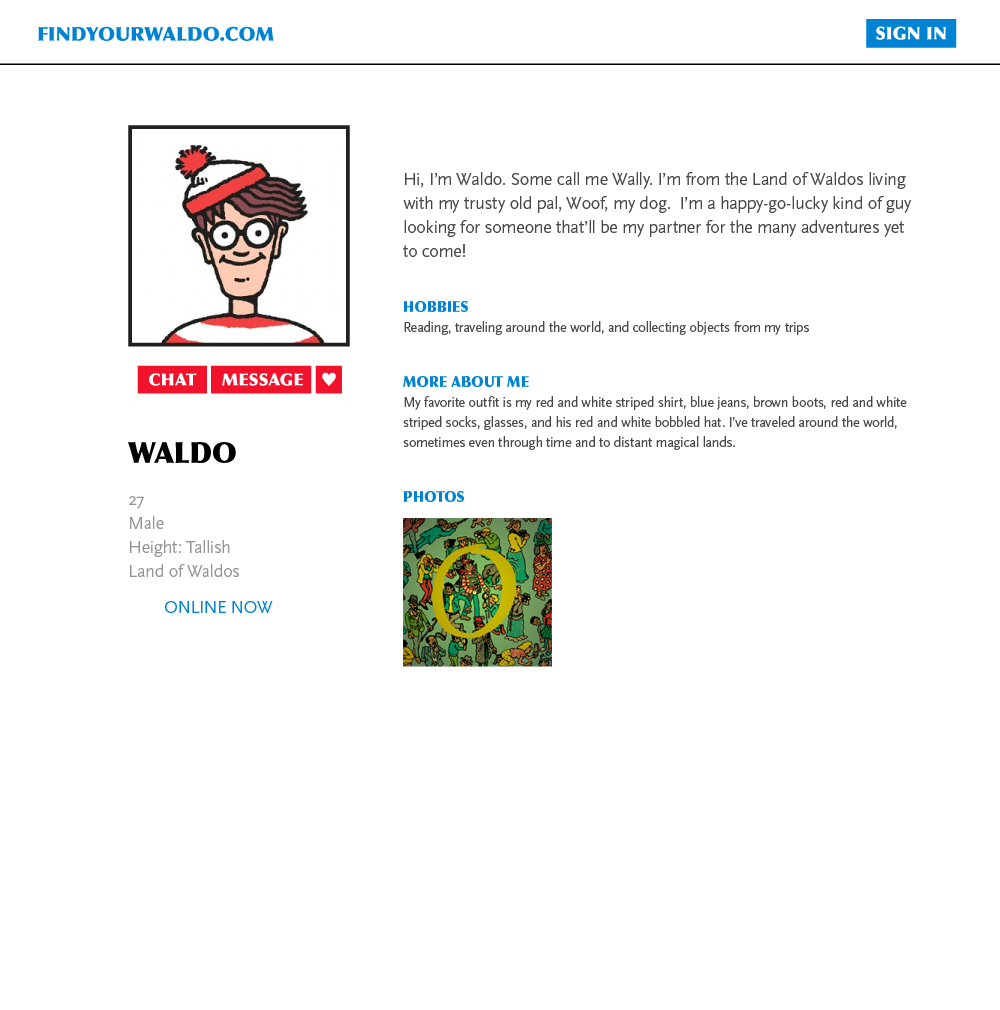
<style>
.page{position:relative;width:1000px;height:1010px;background:#ffffff}
.page>*{position:absolute;margin:0}
.t1{font:14px/20px "ScalaSans-RegularLF";letter-spacing:-0.01em;color:#484848}
.t2{font:18px/24px "ScalaSans-RegularLF";letter-spacing:-0.01em;color:#484848}
.t3{font:14px/15px "OptimaLTStd-ExtraBlack";letter-spacing:-0.01em;color:#0083d2}
.t4{font:18px/12px "ScalaSans-Regular";letter-spacing:-0.01em;color:#959595}
.t5{font:28px/15px "OptimaLTStd-ExtraBlack";letter-spacing:-0.01em;color:#000000;text-transform:uppercase}
.t6{font:18px/12px "ScalaSans-Regular";letter-spacing:-0.01em;color:#0083d2}
</style>
<div class="page">
<p class="t1" style="left:403px;top:172px;width:509px;height:330px"><span class="t2">Hi, I’m Waldo. Some call me Wally. I’m from the Land of Waldos living with my trusty old pal, Woof, my dog.  I’m a happy-go-lucky kind of guy looking for someone that’ll be my partner for the many adventures yet to come!<br></span><br><br><span class="t3">HOBBIES<br></span>Reading, traveling around the world, and collecting objects from my trips<br><br><br><span class="t3">MORE ABOUT ME<br></span>My favorite outfit is my red and white striped shirt, blue jeans, brown boots, red and white striped socks, glasses, and his red and white bobbled hat. I’ve traveled around the world, sometimes even through time and to distant magical lands.<br><br><br><span class="t3">PHOTOS</span></p>
<p class="t4" style="left:128px;top:442px;width:145px;height:171px"><span class="t5">Waldo<br><br><br></span>27<br><br>Male<br><br>Height: Tallish<br><br>Land of Waldos<br><br><br> <span class="t6">ONLINE NOW</span></p>
</div>
